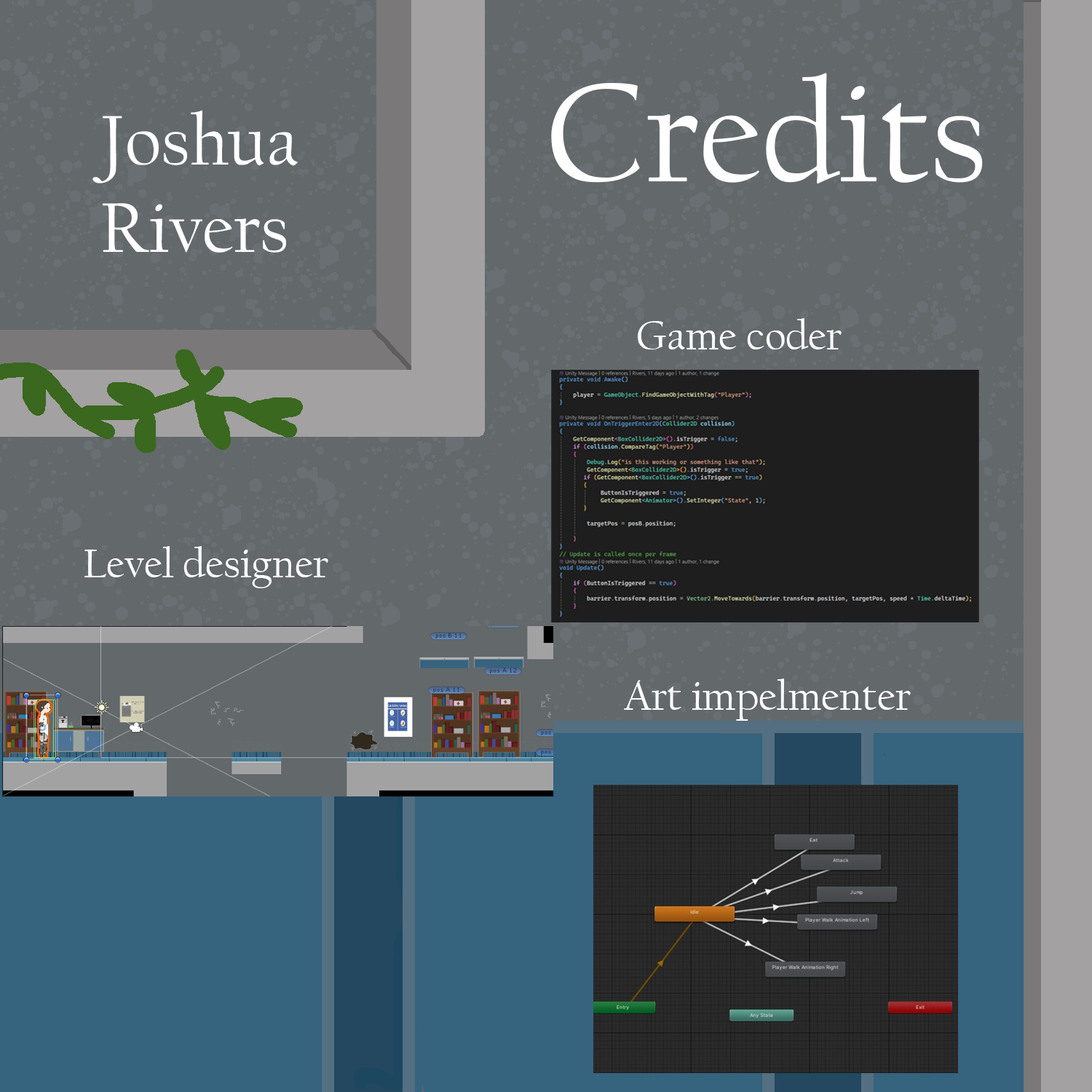
<style>
.page{position:relative;width:1092px;height:1092px;background:#63686b}
.page>*{position:absolute;margin:0}
.t1{font:145.6px "CalifornianFB-Reg";color:#ffffff}
.t2{font:72.8px "CalifornianFB-Reg";color:#ffffff}
.t3{font:42.5px "CalifornianFB-Reg";color:#ffffff}
</style>
<div class="page">
<p class="t1" style="left:551px;top:73px;width:432px;height:111px">Credits</p>
<p class="t2" style="left:92px;top:110px;width:206px;height:143px">Joshua<br>Rivers</p>
<p class="t3" style="left:638px;top:318px;width:204px;height:31px">Game coder</p>
<p class="t3" style="left:84px;top:546px;width:244px;height:42px">Level designer</p>
<p class="t3" style="left:624px;top:678px;width:287px;height:43px">Art impelmenter</p>
</div>
